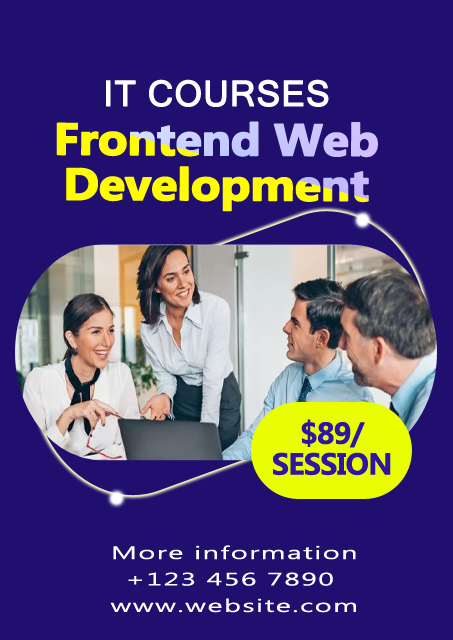
<style>
.page{position:relative;width:453px;height:640px;background:#200f6f}
.page>*{position:absolute;margin:0}
.t1{font:35.2px "MicrosoftSansSerif";letter-spacing:0.01em;color:#ffffff;font-weight:bold}
.t2{font:44.7px/45px "MicrosoftTaiLe-Bold";letter-spacing:-0.03em;font-weight:bold;scale:1.09 1}
.t3{font:30.6px/30.8px "MicrosoftTaiLe-Bold";letter-spacing:-0.03em;color:#2f14a5}
.t4{font:18px/26.5px "MicrosoftTaiLe";letter-spacing:0.05em;color:#ffffff;scale:1.6 1}
</style>
<div class="page">
<p class="t1" style="left:106px;top:79px;width:223px;height:28px">IT COURSES</p>
<p class="t2" style="left:56px;top:121px;width:322px;height:91px;text-align:center">Frontend Web<br>Development</p>
<p class="t3" style="left:273px;top:419px;width:118px;height:57px;text-align:center">$89/<br>SESSION</p>
<p class="t4" style="left:110px;top:545px;width:246px;height:68px;text-align:center">More information<br>+123 456 7890 <br>www.website.com</p>
</div>
